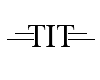
<style>
.page{position:relative;width:100px;height:80px;background:#ffffff}
.page>*{position:absolute;margin:0}
.t1{font:33.4px "TimesNewRomanPSMT";color:#000000;scale:0.92 1}
</style>
<div class="page">
<p class="t1" style="left:28px;top:25px;width:47px;height:22px">TIT</p>
</div>
